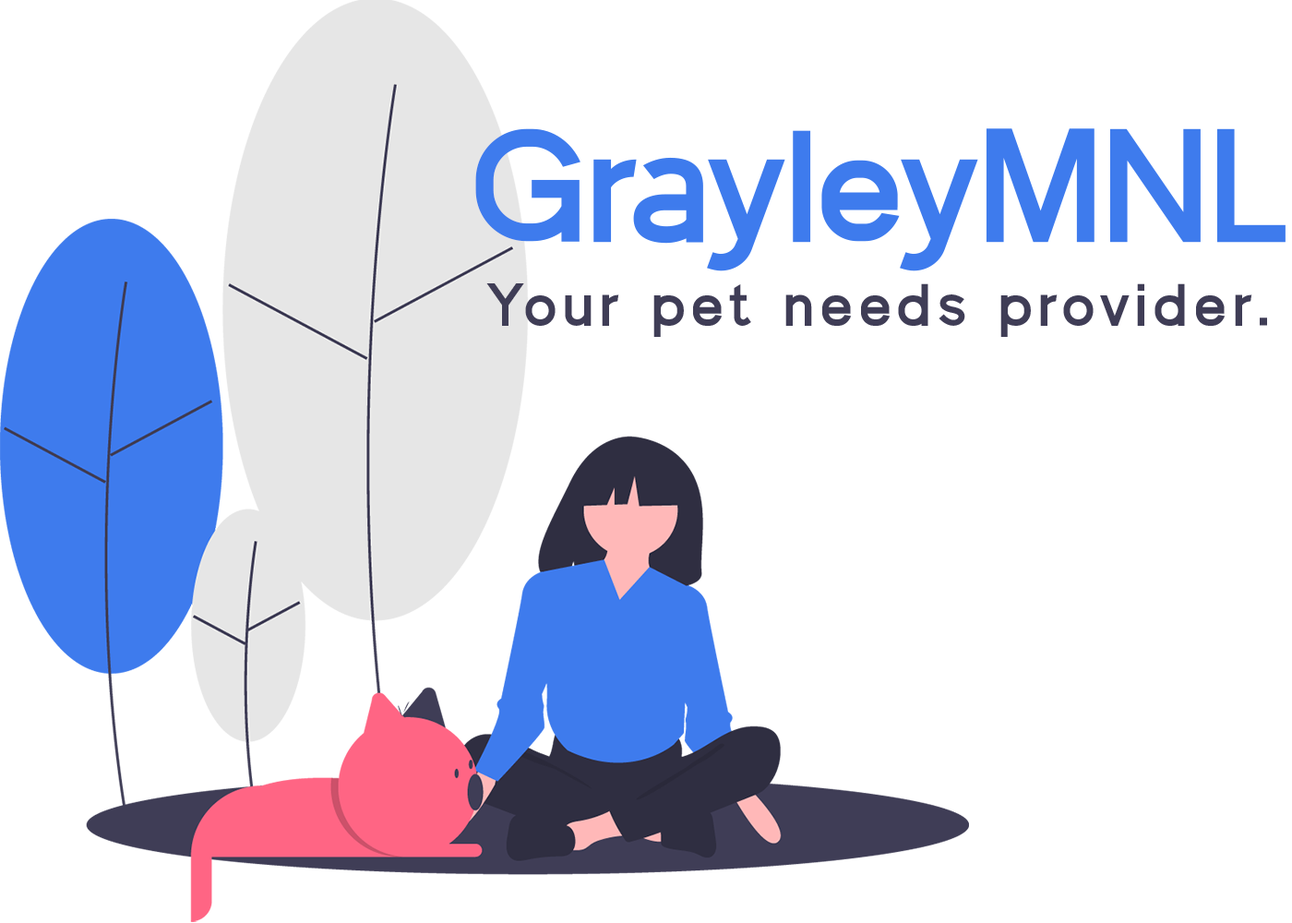
<style>
.page{position:relative;width:1292px;height:923px;background:#ffffff}
.page>*{position:absolute;margin:0}
.t1{font:161.5px "Quicklime-Bold";color:#3e7bed}
.t2{font:60.6px "Quicklime-Bold";letter-spacing:0.105em;color:#3f3d56}
</style>
<div class="page">
<p class="t1" style="left:475px;top:128px;width:811px;height:143px">GrayleyMNL</p>
<p class="t2" style="left:486px;top:283px;width:781px;height:54px">Your pet needs provider.</p>
</div>
